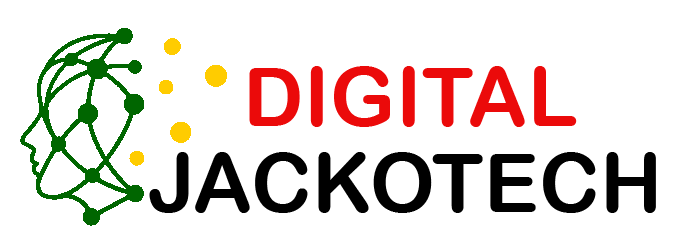
<style>
.page{position:relative;width:681px;height:251px;background:#ffffff}
.page>*{position:absolute;margin:0}
.t1{font:82px "ArialRoundedMTBold";letter-spacing:0.005em;color:#eb0a0a}
.t2{font:82px "ArialRoundedMTBold";letter-spacing:0.005em;color:#000000}
</style>
<div class="page">
<p class="t1" style="left:249px;top:66px;width:328px;height:61px">DIGITAL</p>
<p class="t2" style="left:149px;top:152px;width:507px;height:61px">JACKOTECH</p>
</div>
